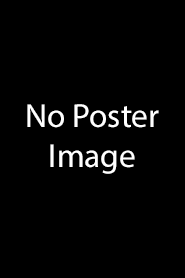
<style>
.page{position:relative;width:185px;height:278px;background:#000000}
.page>*{position:absolute;margin:0}
.t1{font:33.3px "MyriadPro-Regular";color:#ffffff}
</style>
<div class="page">
<p class="t1" style="left:27px;top:104px;width:132px;height:70px;text-align:center">No Poster<br>Image</p>
</div>
